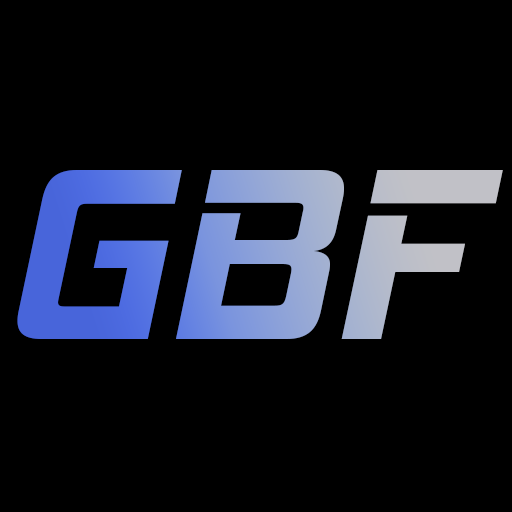
<style>
.page{position:relative;width:512px;height:512px;background:#000000}
.page>*{position:absolute;margin:0}
.t1{font:250px "HemiHeadRg-BoldItalic"}
</style>
<div class="page">
<p class="t1" style="left:17px;top:170px;width:486px;height:169px">GBF</p>
</div>
